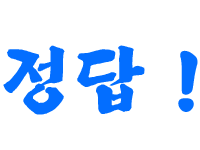
<style>
.page{position:relative;width:200px;height:150px;background:#ffffff}
.page>*{position:absolute;margin:0}
.t1{font:72px "Yj-BACDOO-Bold";color:#036eff}
</style>
<div class="page">
<p class="t1" style="left:3px;top:45px;width:195px;height:70px">정답 !</p>
</div>
